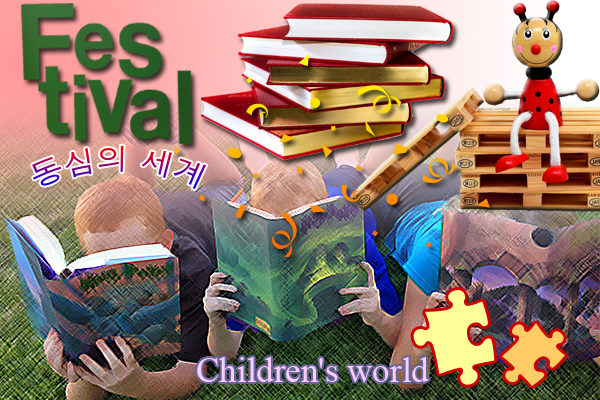
<style>
.page{position:relative;width:600px;height:400px}
.page>*{position:absolute;margin:0}
.t1{font:30px "Dotum"}
.t2{font:35px "TimesNewRomanPSMT";color:#ffccff}
</style>
<div class="page">
<p class="t1" style="left:32px;top:145px;width:175px;height:44px">동심의 세계</p>
<p class="t2" style="left:197px;top:357px;width:232px;height:25px">Children's world</p>
</div>
